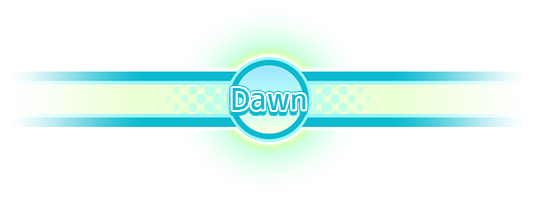
<style>
.page{position:relative;width:536px;height:200px;background:#ffffff}
.page>*{position:absolute;margin:0}
.t1{font:30px "JK-Gothic-M";color:#0dbacf}
</style>
<div class="page">
<p class="t1" style="left:232px;top:88px;width:74px;height:22px">Dawn</p>
</div>
